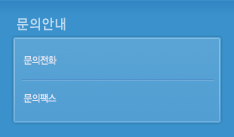
<style>
.page{position:relative;width:234px;height:137px;background:#3a91cb}
.page>*{position:absolute;margin:0}
.t1{font:14px "YDIYGO130-KSCpc-EUC-H";color:#b9d7ef;scale:0.9 1}
.t2{font:10px "YDIYGO130-KSCpc-EUC-H";letter-spacing:-0.1em;color:#d9e0ef;scale:0.9 1}
</style>
<div class="page">
<p class="t1" style="left:17px;top:17px;width:49px;height:14px">문의안내</p>
<p class="t2" style="left:23px;top:55px;width:34px;height:10px">문의전화</p>
<p class="t2" style="left:23px;top:93px;width:34px;height:10px">문의팩스</p>
</div>
